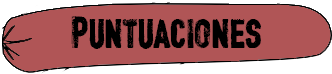
<style>
.page{position:relative;width:332px;height:74px;background:#b05556}
.page>*{position:absolute;margin:0}
.t1{font:48px "CFJacquesParizeau-Regular";color:#000000}
</style>
<div class="page">
<p class="t1" style="left:71px;top:16px;width:190px;height:33px">Puntuaciones</p>
</div>
